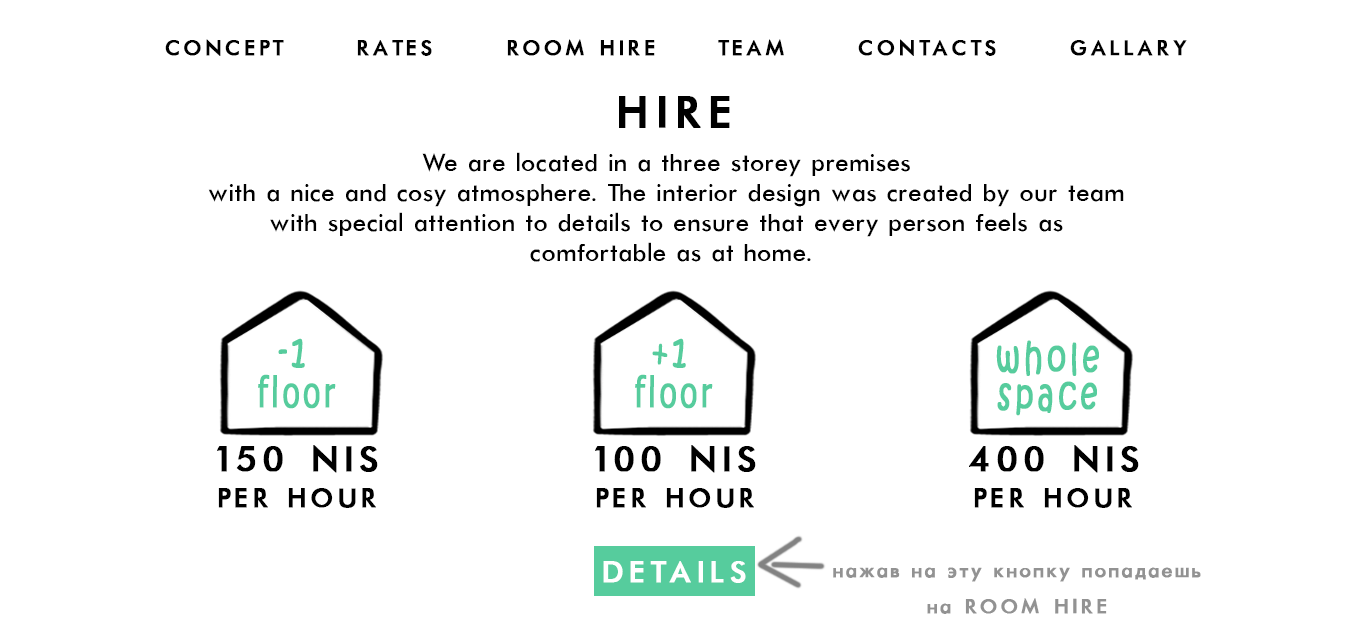
<style>
.page{position:relative;width:1351px;height:638px;background:#ffffff}
.page>*{position:absolute;margin:0}
.t1{font:24px "Futura-Normal";letter-spacing:0.12em;color:#000000;text-transform:uppercase;font-weight:bold}
.t2{font:50px "Futura-Normal";letter-spacing:0.12em;color:#000000;text-transform:uppercase;font-weight:bold}
.t3{font:28px/30px "Futura-Normal";color:#000000}
.t4{font:42px/40px "Tahoma";letter-spacing:0.12em;color:#56cc9d;font-weight:bold;scale:0.71 1}
.t5{font:42px/40px "KristenITC-Regular";letter-spacing:0.12em;color:#56cc9d;font-weight:bold;scale:0.71 1}
.t6{font:42px/37px "KristenITC-Regular";letter-spacing:0.12em;color:#56cc9d;font-weight:bold;scale:0.71 1}
.t7{font:30px/36px "Futura-Normal";letter-spacing:0.12em;color:#000000;text-transform:uppercase;font-weight:bold}
.t8{font:40px/36px "Futura-Normal";letter-spacing:0.12em;color:#000000;text-transform:uppercase;font-weight:bold}
.t9{font:34px "Futura-Normal";letter-spacing:0.12em;color:#ffffff;text-transform:uppercase;font-weight:bold}
.t10{font:23px/36px "Futura-Normal";letter-spacing:0.05em;color:#929292;font-weight:bold}
.t11{font:23px/36px "Futura-Normal";letter-spacing:0.12em;color:#929292;text-transform:uppercase;font-weight:bold}
</style>
<div class="page">
<p class="t1" style="left:165px;top:39px;width:1022px;height:17px">concept      rates      room hire     team      contacts      gallary</p>
<p class="t2" style="left:619px;top:96px;width:111px;height:32px">hire</p>
<p class="t3" style="left:208px;top:152px;width:916px;height:110px;text-align:center">We are located in a three storey premises <br>with a nice and cosy atmosphere. The interior design was created by our team <br>with special attention to details to ensure that every person feels as <br>comfortable as at home.</p>
<p class="t4" style="left:258px;top:338px;width:78px;height:71px;text-align:center"><span class="t5">-1 <br></span>floor</p>
<p class="t4" style="left:635px;top:338px;width:78px;height:71px;text-align:center"><span class="t5">+1 <br></span>floor</p>
<p class="t6" style="left:996px;top:340px;width:103px;height:76px;text-align:center">whole<br>space</p>
<p class="t7" style="left:217px;top:445px;width:161px;height:63px;text-align:center"><span class="t8">150 NIS<br></span>per hour</p>
<p class="t7" style="left:595px;top:445px;width:161px;height:63px;text-align:center"><span class="t8">100 NIS<br></span>per hour</p>
<p class="t7" style="left:969px;top:445px;width:170px;height:63px;text-align:center"><span class="t8">400 NIS<br></span>per hour</p>
<p class="t9" style="left:603px;top:561px;width:143px;height:22px">details</p>
<p class="t10" style="left:833px;top:567px;width:368px;height:47px;text-align:center">нажав на эту кнопку попадаешь<br>на<span class="t11"> room hire</span></p>
</div>
